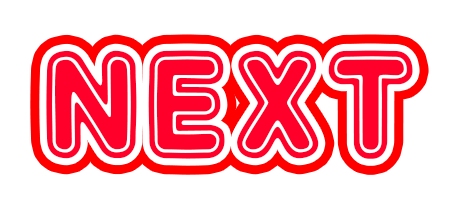
<style>
.page{position:relative;width:460px;height:208px;background:#ffffff}
.page>*{position:absolute;margin:0}
.t1{font:150px "DokiDokiFantasia";letter-spacing:0.02em;color:#ff002a}
</style>
<div class="page">
<p class="t1" style="left:46px;top:50px;width:367px;height:109px">NEXT</p>
</div>
